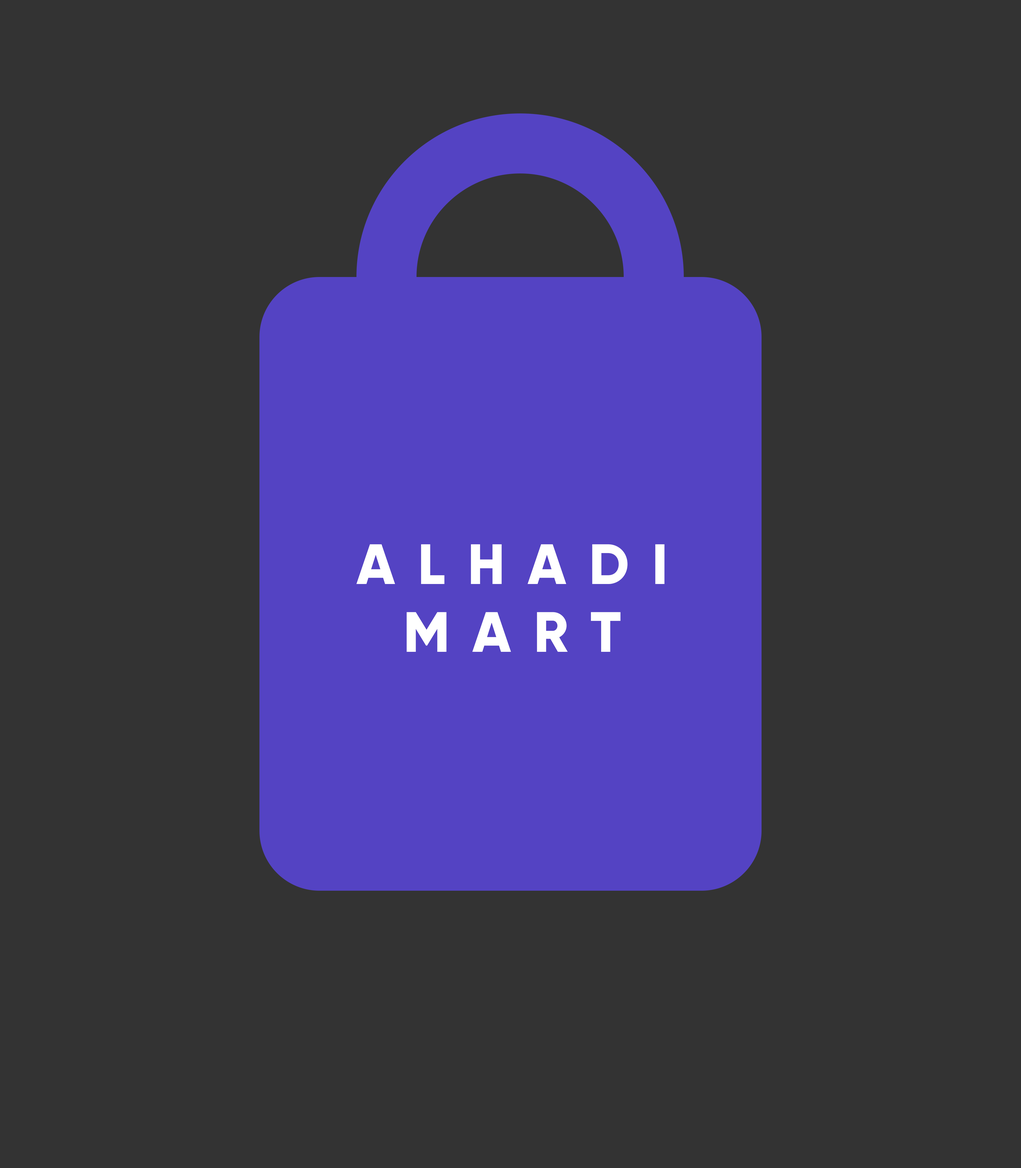
<style>
.page{position:relative;width:1021px;height:1168px;background:#333333}
.page>*{position:absolute;margin:0}
.t1{font:56.7px "Gilroy-ExtraBold";letter-spacing:0.4em;color:#ffffff}
</style>
<div class="page">
<p class="t1" style="left:356px;top:544px;width:308px;height:108px;text-align:center">ALHADI<br>MART</p>
</div>
